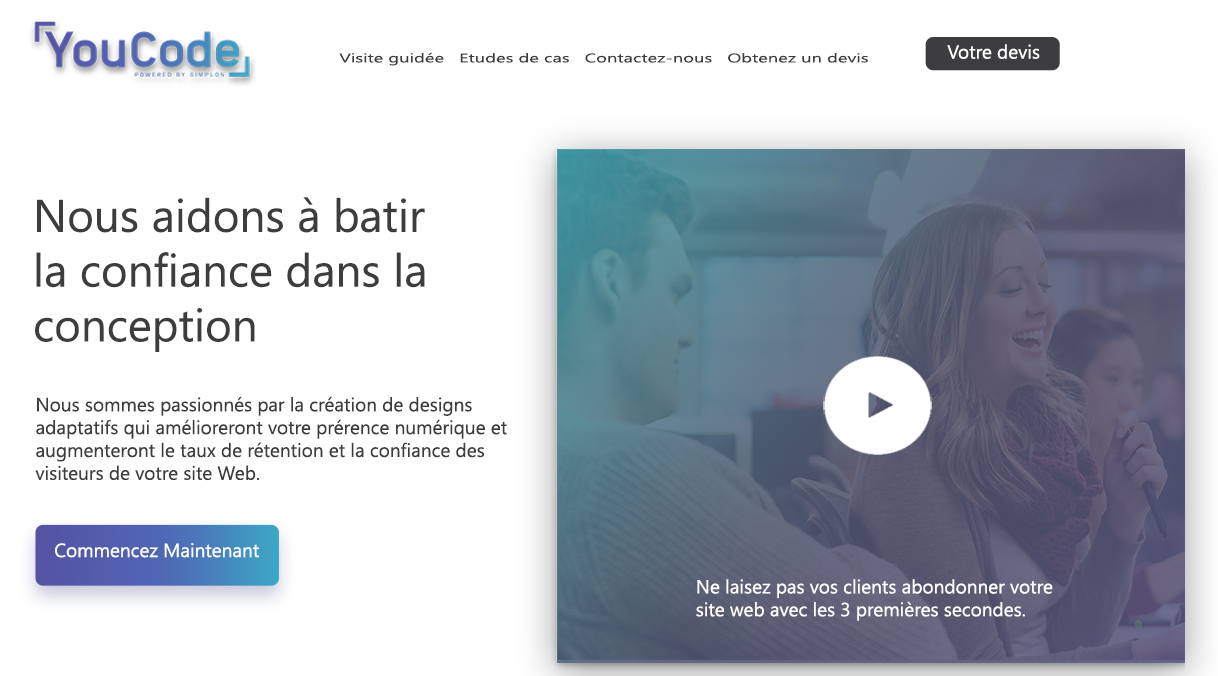
<style>
.page{position:relative;width:1218px;height:676px;background:#ffffff}
.page>*{position:absolute;margin:0}
.t1{font:12.5px "SegoeUISymbol";color:#3d3d3f;scale:1.47 1}
.t2{font:19px "SegoeUISymbol";color:#ffffff}
.t3{font:45.6px "SegoeUISymbol";color:#3d3d3f}
.t4{font:19px "SegoeUISymbol";color:#3d3d3f}
</style>
<div class="page">
<p class="t1" style="left:339px;top:52px;width:529px;height:14px">Visite guidée   Etudes de cas   Contactez-nous   Obtenez un devis</p>
<p class="t2" style="left:947px;top:44px;width:93px;height:15px">Votre devis</p>
<p class="t3" style="left:35px;top:197px;width:390px;height:155px">Nous aidons à batir<br>la confiance dans la<br>conception</p>
<p class="t4" style="left:35px;top:396px;width:472px;height:85px">Nous sommes passionnés par la création de designs<br>adaptatifs qui amélioreront votre prérence numérique et <br>augmenteront le taux de rétention et la confiance des<br>visiteurs de votre site Web.</p>
<p class="t2" style="left:55px;top:543px;width:204px;height:15px">Commencez Maintenant</p>
<p class="t2" style="left:696px;top:579px;width:357px;height:42px">Ne laisez pas vos clients abondonner votre<br>site web avec les 3 premières secondes.</p>
</div>
